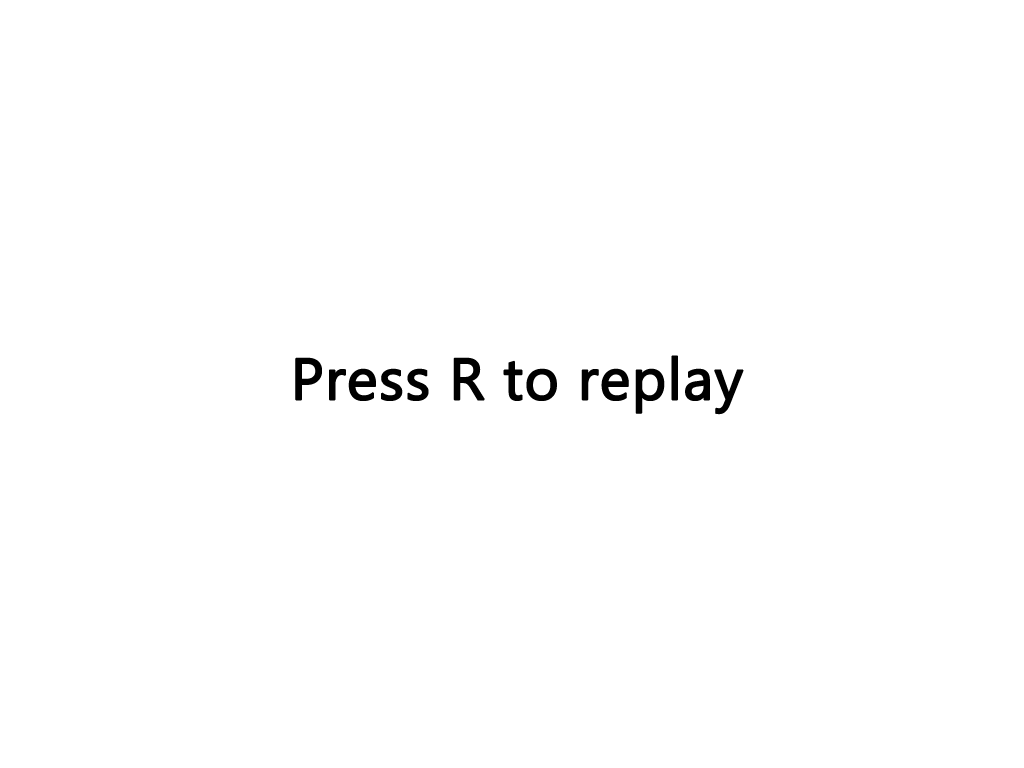
<style>
.page{position:relative;width:1024px;height:768px;background:#ffffff}
.page>*{position:absolute;margin:0}
.t1{font:58.3px "LaoUI";color:#000000;font-weight:bold}
</style>
<div class="page">
<p class="t1" style="left:295px;top:355px;width:449px;height:60px">Press R to replay</p>
</div>
